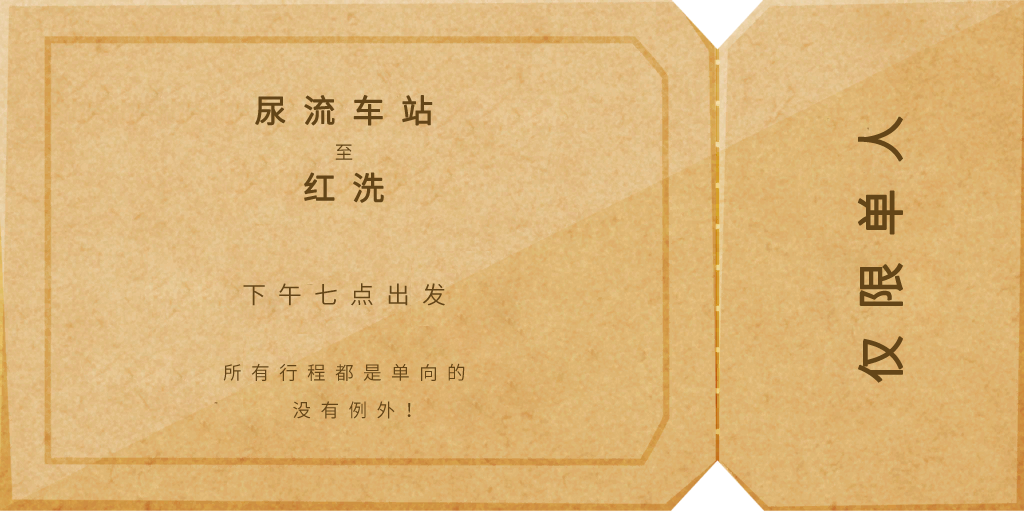
<style>
.page{position:relative;width:1024px;height:512px}
.page>*{position:absolute;margin:0}
.t1{font:32px/77.3px "SourceHanSansSC-Normal";letter-spacing:0.5em;color:#634518;font-weight:bold}
.t2{font:48px "SourceHanSansSC-Normal";letter-spacing:0.5em;color:#634518;font-weight:bold}
.t3{font:18.7px "SourceHanSansSC-Normal";letter-spacing:0.5em;color:#634518}
.t4{font:24px "SourceHanSansSC-Normal";letter-spacing:0.5em;color:#634518}
.t5{font:18.7px/37.3px "SourceHanSansSC-Normal";letter-spacing:0.5em;color:#634518}
</style>
<div class="page">
<p class="t1" style="left:255px;top:95px;width:178px;height:108px;text-align:center">尿流车站<br>红洗</p>
<p class="t2" style="left:857px;top:116px;width:46px;height:267px;rotate:-90deg">仅限单人</p>
<p class="t3" style="left:335px;top:144px;width:18px;height:16px">至</p>
<p class="t4" style="left:243px;top:283px;width:202px;height:23px">下午七点出发</p>
<p class="t5" style="left:223px;top:363px;width:242px;height:56px;text-align:center">所有行程都是单向的<br>  没有例外！</p>
</div>
